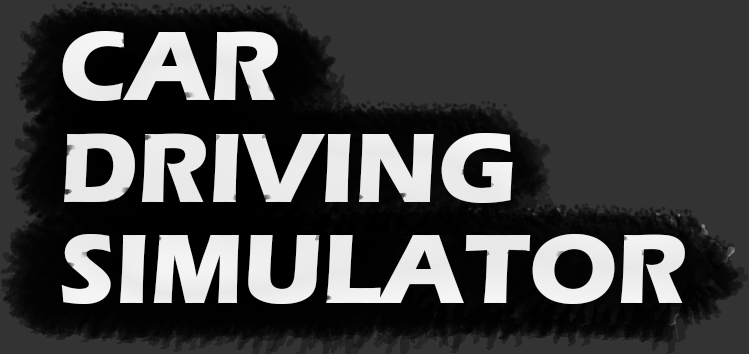
<style>
.page{position:relative;width:749px;height:354px;background:#333333}
.page>*{position:absolute;margin:0}
.t1{font:101.5px/101.5px "ErasITC-Bold";color:#ffffff}
</style>
<div class="page">
<p class="t1" style="left:61px;top:31px;width:624px;height:273px">CAR<br>DRIVING <br>SIMULATOR</p>
</div>
